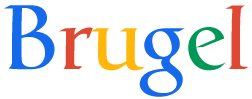
<style>
.page{position:relative;width:252px;height:99px;background:#ffffff}
.page>*{position:absolute;margin:0}
.t1{font:90px "Catull-Regular";color:#156aeb}
.t2{font:90px "Catull-Regular";color:#df4833}
.t3{font:90px "Catull-Regular";color:#ffb70b}
.t4{font:90px "Catull-Regular";color:#009856}
</style>
<div class="page">
<p class="t1" style="left:4px;top:5px;width:245px;height:92px">B<span class="t2">r</span><span class="t3">u</span>g<span class="t4">e</span><span class="t2">l</span></p>
</div>
